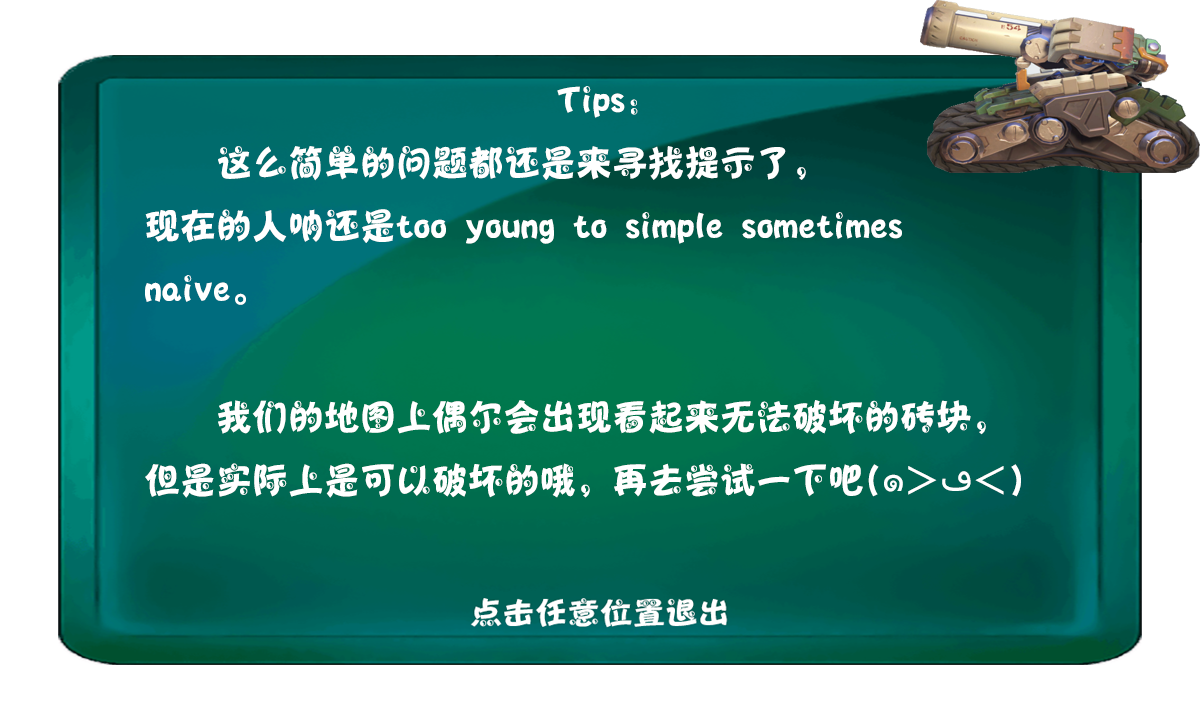
<style>
.page{position:relative;width:1200px;height:720px;background:#ffffff}
.page>*{position:absolute;margin:0}
.t1{font:36px "Jtaiji";color:#ffffff}
.t2{font:36px "Tahoma";color:#ffffff}
</style>
<div class="page">
<p class="t1" style="left:145px;top:86px;width:876px;height:412px;text-align:center">Tips:<br>      这么简单的问题都还是来寻找提示了，<br>    现在的人呐还是too young to simple sometimes<br>    naive。<br><br>      我们的地图上偶尔会出现看起来无法破坏的砖块，<br>    但是实际上是可以破坏的哦，再去尝试一下吧(<span class="t2">๑</span>＞<span class="t2">ڡ</span>＜)</p>
</div>
